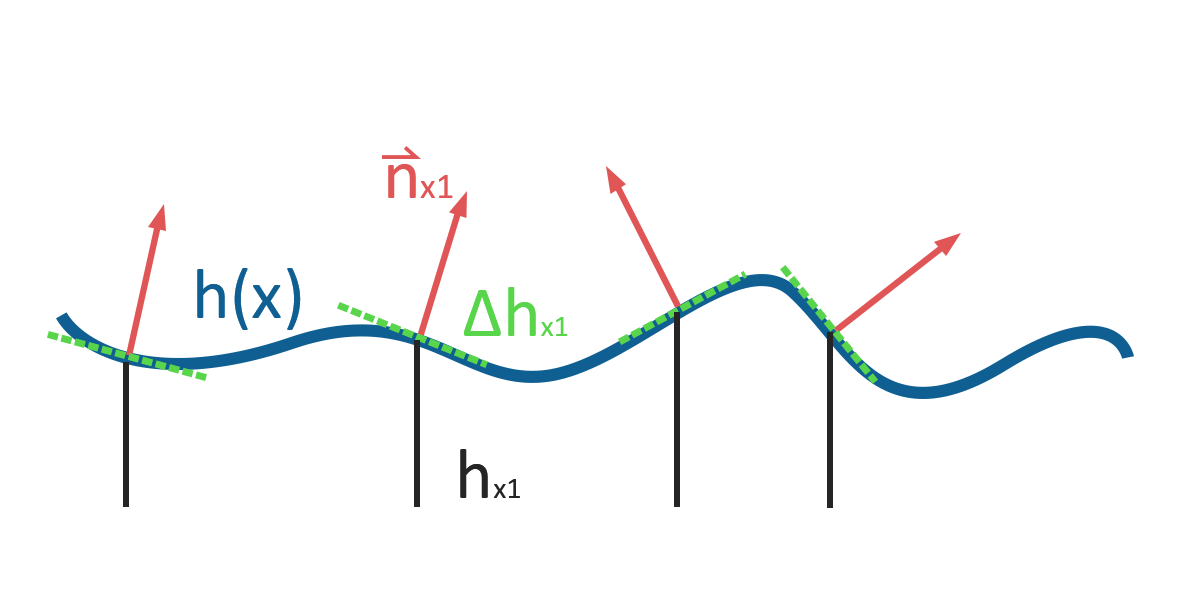
<style>
.page{position:relative;width:1200px;height:600px;background:#ffffff}
.page>*{position:absolute;margin:0}
.t1{font:36px "Calibri";color:#e05555}
.t2{font:72px "Calibri";color:#e05555}
.t3{font:72px "Calibri";color:#0f5f93}
.t4{font:72px "Calibri";color:#59d54c}
.t5{font:30px "Calibri";color:#59d54c}
.t6{font:30px "Calibri";color:#252525}
.t7{font:72px "Calibri";color:#252525}
</style>
<div class="page">
<p class="t1" style="left:388px;top:164px;width:65px;height:34px"><span class="t2">n</span>x1</p>
<p class="t3" style="left:197px;top:268px;width:104px;height:62px">h(x)</p>
<p class="t4" style="left:464px;top:287px;width:104px;height:49px">∆h<span class="t5">x1</span></p>
<p class="t6" style="left:460px;top:449px;width:60px;height:49px"><span class="t7">h</span>x1</p>
</div>
